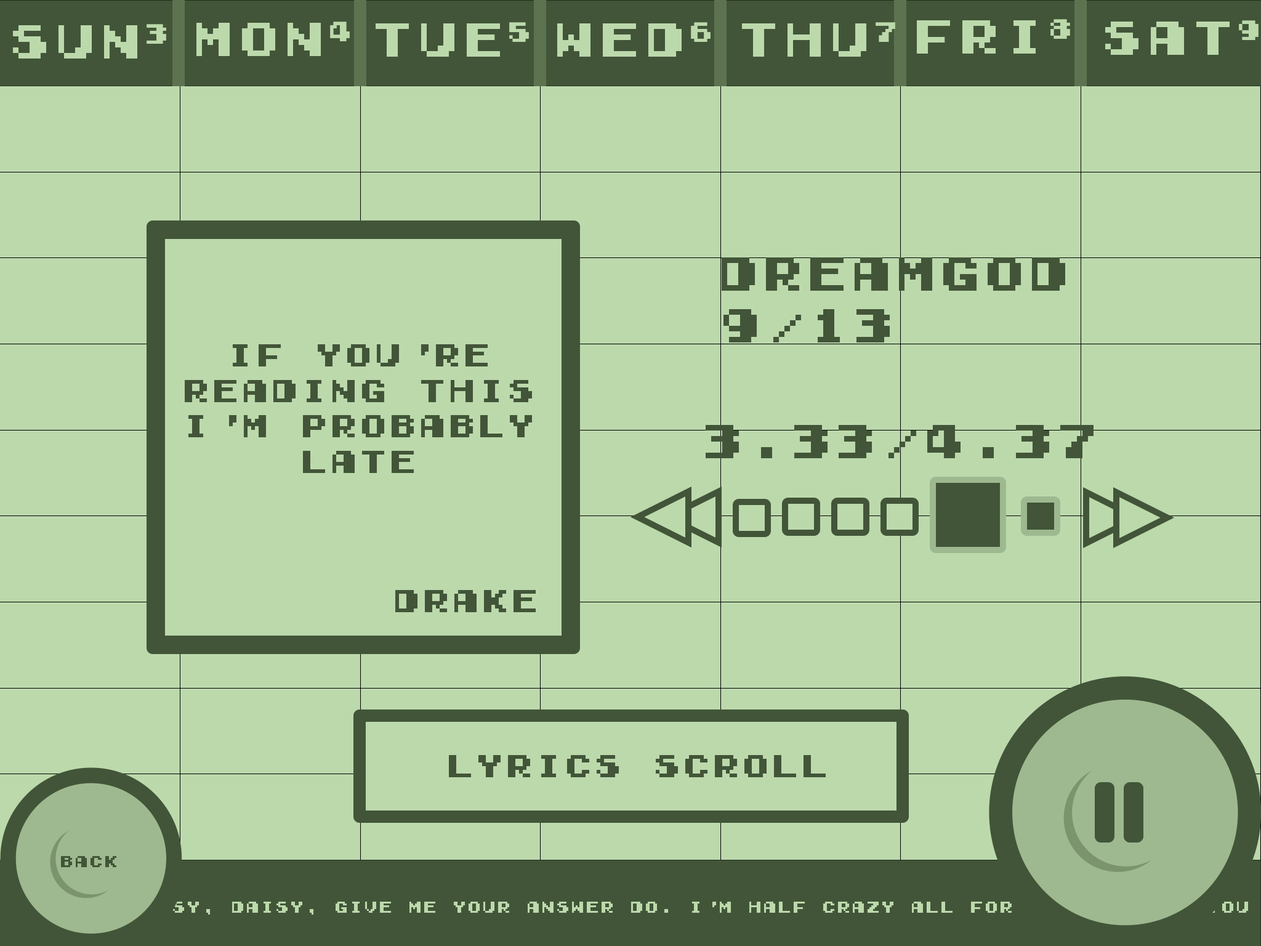
<style>
.page{position:relative;width:1261px;height:946px;background:#bcd9ac}
.page>*{position:absolute;margin:0}
.t1{font:44.3px "GamegirlClassic";color:#425538}
.t2{font:29.6px "GamegirlClassic";color:#425538}
.t3{font:14.8px "GamegirlClassic";color:#425538}
.t4{font:14.8px "GamegirlClassic";color:#bcd9ac}
</style>
<div class="page">
<p class="t1" style="left:722px;top:257px;width:343px;height:34px">DREAMGOD</p>
<p class="t1" style="left:723px;top:309px;width:167px;height:33px">9/13</p>
<p class="t2" style="left:185px;top:344px;width:347px;height:129px;text-align:center">if you're<br>reading this<br>i'm probably<br>late</p>
<p class="t1" style="left:706px;top:425px;width:387px;height:33px">3.33/4.37</p>
<p class="t2" style="left:395px;top:590px;width:141px;height:22px">drake</p>
<p class="t2" style="left:449px;top:755px;width:377px;height:22px">lyrics scroll</p>
<p class="t3" style="left:61px;top:856px;width:55px;height:11px">back</p>
<p class="t4" style="left:129px;top:901px;width:1119px;height:13px">Daisy, Daisy, give me your answer do. I'm half crazy all for the love of you</p>
</div>
